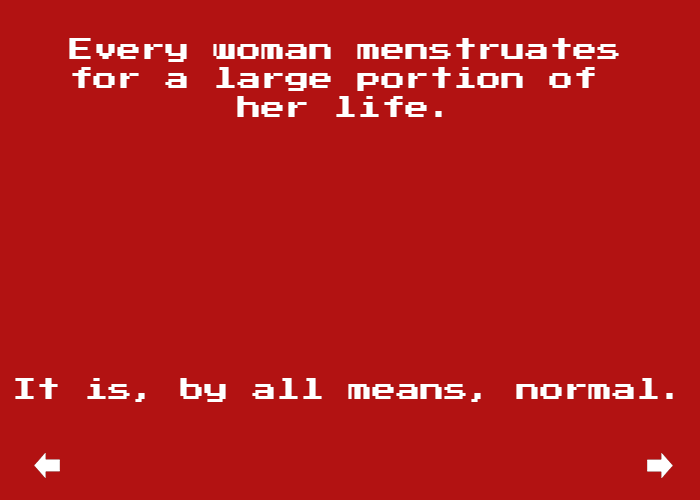
<style>
.page{position:relative;width:700px;height:500px;background:#b21212}
.page>*{position:absolute;margin:0}
.t1{font:24px "PressStart2P";color:#ffffff}
</style>
<div class="page">
<p class="t1" style="left:69px;top:38px;width:550px;height:79px">Every woman menstruates<br>for a large portion of<br>       her life.</p>
<p class="t1" style="left:15px;top:378px;width:658px;height:24px">It is, by all means, normal.</p>
</div>
